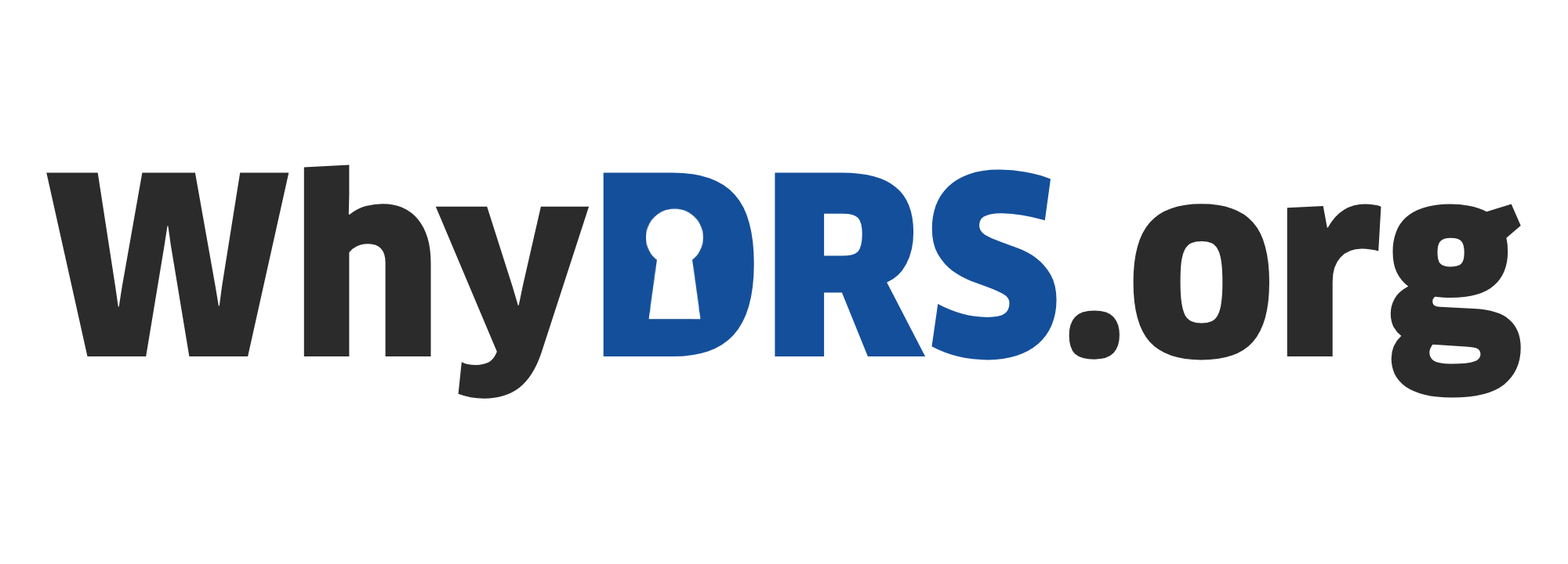
<style>
.page{position:relative;width:1568px;height:564px;background:#ffffff}
.page>*{position:absolute;margin:0}
.t1{font:245px "ClanPro-Black";color:#2b2b2b;scale:0.96 1}
.t2{font:245px "ClanPro-Black";color:#144f9b;scale:0.96 1}
</style>
<div class="page">
<p class="t1" style="left:46px;top:165px;width:1475px;height:234px">Why<span class="t2">DRS</span>.org</p>
</div>
